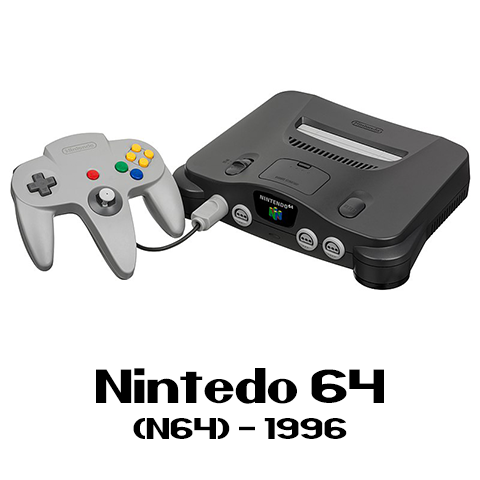
<style>
.page{position:relative;width:480px;height:480px;background:#ffffff}
.page>*{position:absolute;margin:0}
.t1{font:30px "Nintender";color:#000000}
.t2{font:48px "Nintender";color:#000000}
</style>
<div class="page">
<p class="t1" style="left:96px;top:368px;width:288px;height:71px;text-align:center"><span class="t2">Nintedo 64<br></span>(N64) - 1996</p>
</div>
